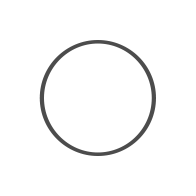
<style>
.page{position:relative;width:196px;height:196px;background:#ffffff}
.page>*{position:absolute;margin:0}
.t1{font:160px "FilsonSoft-Thin";color:#4c4c4c}
</style>
<div class="page">
<p class="t1" style="left:39px;top:40px;width:117px;height:116px">O</p>
</div>
